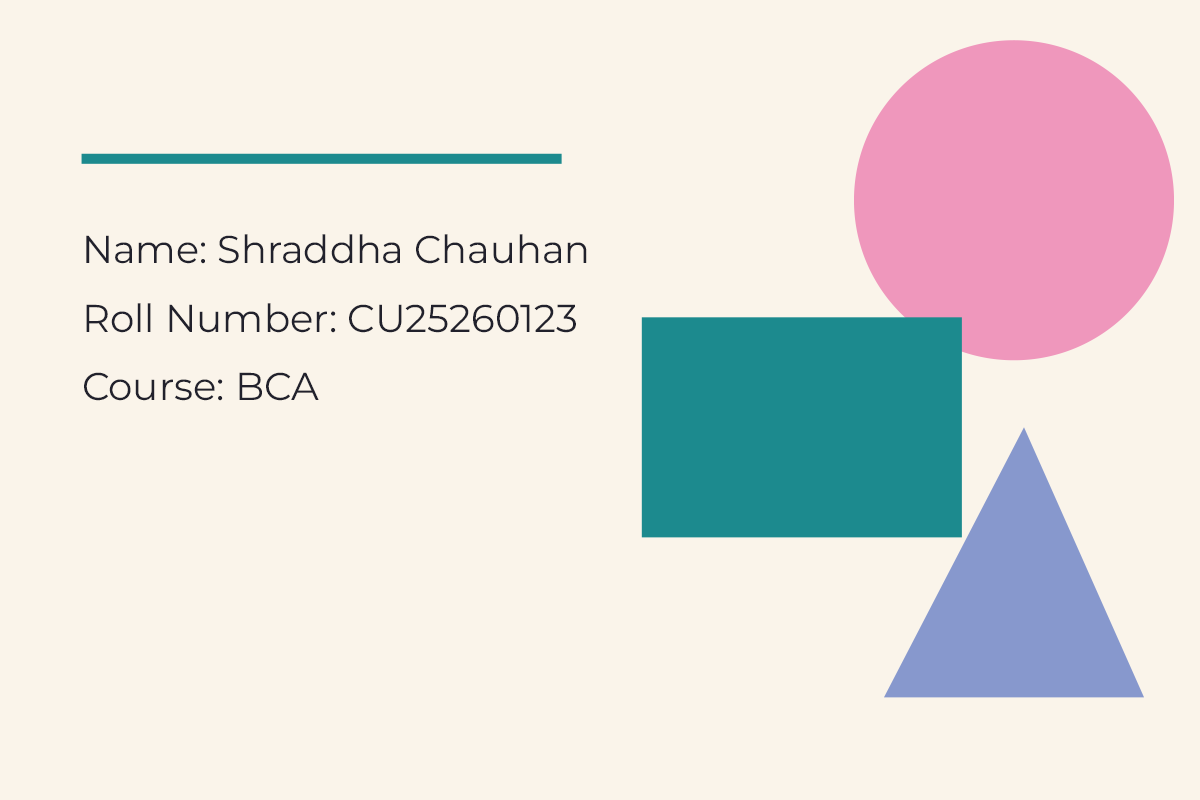
<style>
.page{position:relative;width:1200px;height:800px;background:#faf4ea}
.page>*{position:absolute;margin:0}
.t1{font:38.8px "Montserrat-Regular";color:#22222c}
</style>
<div class="page">
<p class="t1" style="left:86px;top:234px;width:501px;height:30px">Name: Shraddha Chauhan</p>
<p class="t1" style="left:86px;top:303px;width:490px;height:30px">Roll Number: CU25260123</p>
<p class="t1" style="left:84px;top:372px;width:235px;height:29px">Course: BCA</p>
</div>
